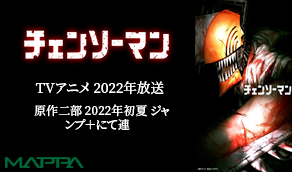
<style>
.page{position:relative;width:292px;height:172px;background:#000000}
.page>*{position:absolute;margin:0}
.t1{font:13.6px "NotoSerifJP-Medium";color:#ffffff}
.t2{font:12px/14.7px "NotoSerifJP-Medium";color:#ffffff}
.t3{font:12px/14.7px "NotoSerifJP-Medium";color:#000000}
</style>
<div class="page">
<p class="t1" style="left:35px;top:81px;width:129px;height:14px">TVアニメ 2022年放送</p>
<p class="t2" style="left:34px;top:104px;width:136px;height:27px;text-align:center">原作二部 2022年初夏 ジャンプ＋にて連<span class="t3">載</span></p>
</div>
